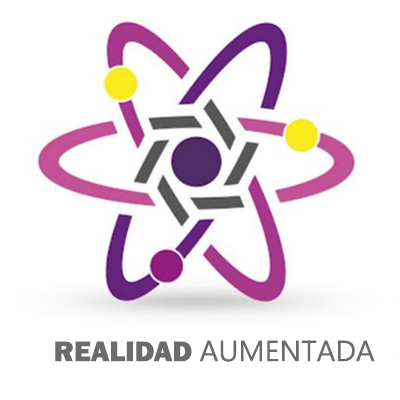
<style>
.page{position:relative;width:400px;height:400px;background:#ffffff}
.page>*{position:absolute;margin:0}
.t1{font:29.2px "Ebrima";color:#6c6a6a}
.t2{font:29.2px "FranklinGothic-Heavy";color:#6c6a6a}
</style>
<div class="page">
<p class="t1" style="left:55px;top:340px;width:320px;height:22px"><span class="t2">REALIDAD </span>AUMENTADA</p>
</div>
